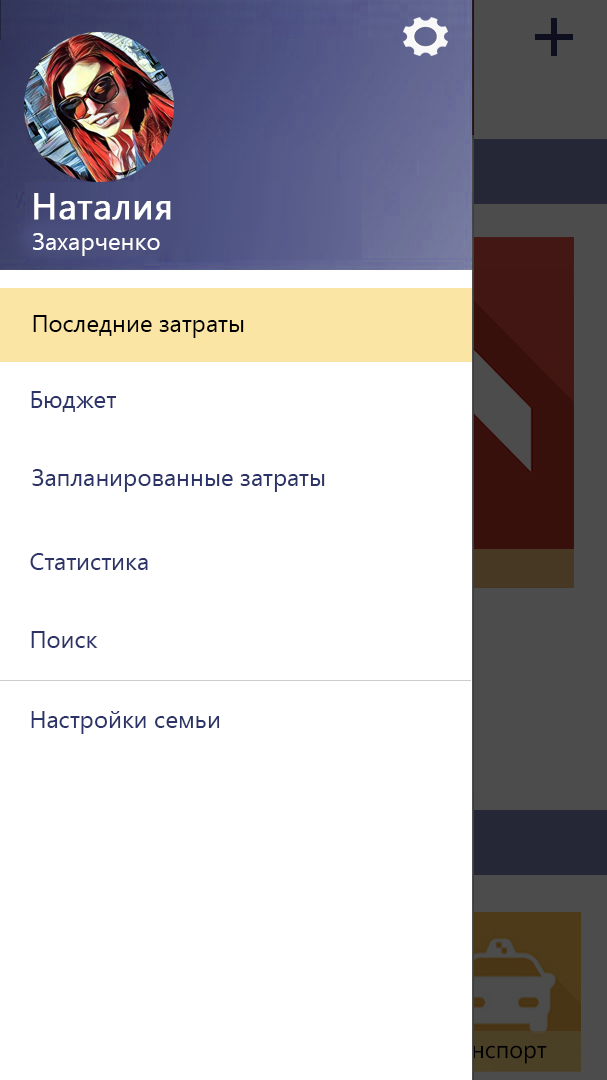
<style>
.page{position:relative;width:607px;height:1080px;background:#ffffff}
.page>*{position:absolute;margin:0}
.t1{font:36px "YuGothicUI-Regular";color:#ffffff;font-weight:bold}
.t2{font:24px "YuGothicUI-Regular";color:#ffffff}
.t3{font:24px "YuGothicUI-Regular";color:#000000}
.t4{font:24px "YuGothicUI-Regular";color:#2b3368}
</style>
<div class="page">
<p class="t1" style="left:34px;top:193px;width:137px;height:27px">Наталия</p>
<p class="t2" style="left:33px;top:233px;width:127px;height:23px">Захарченко</p>
<p class="t3" style="left:33px;top:315px;width:211px;height:23px">Последние затраты</p>
<p class="t4" style="left:31px;top:391px;width:86px;height:21px">Бюджет</p>
<p class="t4" style="left:32px;top:469px;width:293px;height:23px">Запланированные затраты</p>
<p class="t4" style="left:30px;top:553px;width:118px;height:17px">Статистика</p>
<p class="t4" style="left:31px;top:631px;width:67px;height:17px">Поиск</p>
<p class="t4" style="left:31px;top:711px;width:189px;height:23px">Настройки семьи</p>
</div>
